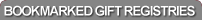
<style>
.page{position:relative;width:202px;height:20px;background:#858585}
.page>*{position:absolute;margin:0}
.t1{font:13.3px "Arial-BoldMT";letter-spacing:-0.075em;color:#ffffff}
</style>
<div class="page">
<p class="t1" style="left:4px;top:5px;width:191px;height:11px">BOOKMARKED GIFT REGISTRIES</p>
</div>
